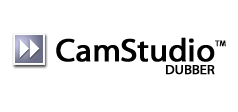
<style>
.page{position:relative;width:238px;height:112px;background:#ffffff}
.page>*{position:absolute;margin:0}
.t1{font:32.4px "MyriadWebPro";letter-spacing:-0.01em;color:#000000;font-weight:bold}
.t2{font:8.1px "MyriadWebPro";letter-spacing:-0.01em;color:#000000;font-weight:bold}
.t3{font:13.5px "MyriadWebPro";letter-spacing:-0.01em;color:#000000;font-weight:bold}
</style>
<div class="page">
<p class="t1" style="left:56px;top:37px;width:159px;height:25px">CamStudio</p>
<p class="t2" style="left:215px;top:40px;width:11px;height:7px">TM</p>
<p class="t3" style="left:166px;top:65px;width:49px;height:10px">DUBBER</p>
</div>
